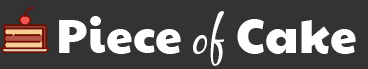
<style>
.page{position:relative;width:368px;height:69px;background:#333333}
.page>*{position:absolute;margin:0}
.t1{font:48px "PaytoneOne";letter-spacing:0.005em;color:#ffffff}
.t2{font:48px "BlackJack";letter-spacing:0.005em;color:#ffffff}
</style>
<div class="page">
<p class="t1" style="left:59px;top:11px;width:297px;height:55px">Piece <span class="t2">of</span> Cake</p>
</div>
